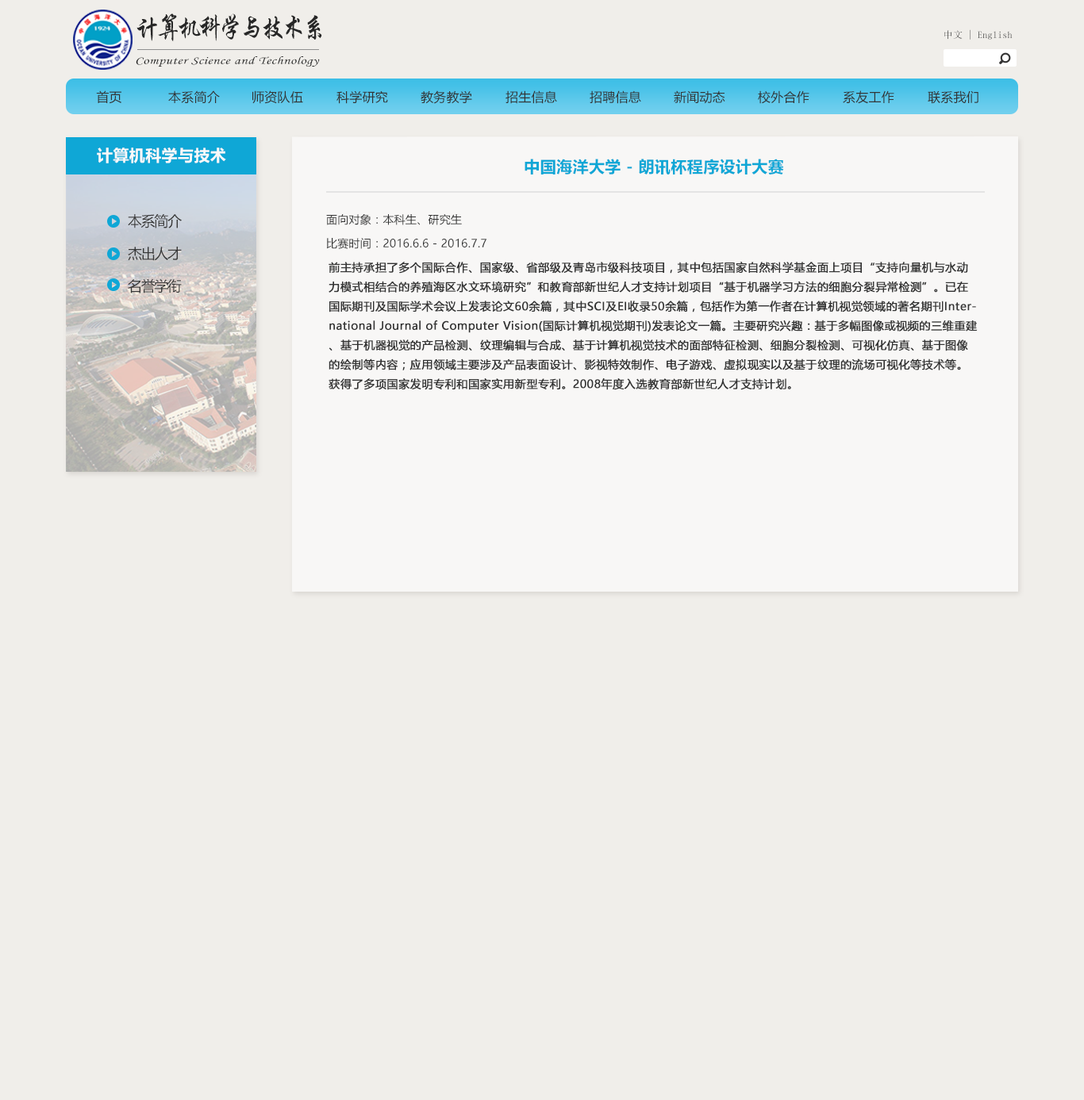
<style>
.page{position:relative;width:1084px;height:1100px;background:#f0eeea}
.page>*{position:absolute;margin:0}
.t1{font:27.6px "STXingkai";letter-spacing:-0.14em;color:#272727;scale:0.88 1}
.t2{font:9.5px "SimSun";letter-spacing:0.02em}
.t3{font:10.9px "STLiti";letter-spacing:0.02em;color:#272727;scale:1.34 1}
.t4{font:12.7px "MicrosoftYaHei";letter-spacing:0.02em;color:#333333}
.t5{font:15.9px "MicrosoftYaHei-Bold";letter-spacing:0.02em;color:#f9f9f9}
.t6{font:15.9px "MicrosoftYaHei-Bold";letter-spacing:0.02em;color:#0fa7d6}
.t7{font:14.3px "MicrosoftYaHei";letter-spacing:-0.076em;color:#383838}
.t8{font:11.1px "MicrosoftYaHei";letter-spacing:0.02em;color:#333333}
.t9{font:11.1px "MicrosoftYaHei";letter-spacing:0.02em;color:#333333;font-weight:bold}
</style>
<div class="page">
<p class="t1" style="left:136px;top:13px;width:186px;height:28px">计算机科学与技术系</p>
<p class="t2" style="left:944px;top:29px;width:68px;height:11px">中文 | English</p>
<p class="t3" style="left:136px;top:56px;width:184px;height:11px">Computer Science and Technology</p>
<p class="t4" style="left:96px;top:90px;width:25px;height:14px">首页</p>
<p class="t4" style="left:168px;top:90px;width:52px;height:14px">本系简介</p>
<p class="t4" style="left:252px;top:90px;width:51px;height:14px">师资队伍</p>
<p class="t4" style="left:336px;top:90px;width:52px;height:14px">科学研究</p>
<p class="t4" style="left:420px;top:90px;width:52px;height:14px">教务教学</p>
<p class="t4" style="left:505px;top:90px;width:52px;height:14px">招生信息</p>
<p class="t4" style="left:589px;top:90px;width:52px;height:14px">招聘信息</p>
<p class="t4" style="left:674px;top:90px;width:51px;height:14px">新闻动态</p>
<p class="t4" style="left:758px;top:90px;width:51px;height:14px">校外合作</p>
<p class="t4" style="left:843px;top:90px;width:51px;height:14px">系友工作</p>
<p class="t4" style="left:927px;top:90px;width:51px;height:14px">联系我们</p>
<p class="t5" style="left:97px;top:148px;width:129px;height:15px">计算机科学与技术</p>
<p class="t6" style="left:524px;top:159px;width:260px;height:16px">中国海洋大学 - 朗讯杯程序设计大赛</p>
<p class="t7" style="left:128px;top:214px;width:54px;height:14px">本系简介</p>
<p class="t8" style="left:326px;top:214px;width:136px;height:11px">面向对象：本科生、研究生</p>
<p class="t8" style="left:326px;top:238px;width:160px;height:11px">比赛时间：2016.6.6 - 2016.7.7</p>
<p class="t7" style="left:128px;top:247px;width:54px;height:14px">杰出人才</p>
<p class="t9" style="left:328px;top:262px;width:649px;height:128px">前主持承担了多个国际合作、国家级、省部级及青岛市级科技项目，其中包括国家自然科学基金面上项目“支持向量机与水动力模式相结合的养殖海区水文环境研究”和教育部新世纪人才支持计划项目“基于机器学习方法的细胞分裂异常检测”。已在国际期刊及国际学术会议上发表论文60余篇，其中SCI及EI收录50余篇，包括作为第一作者在计算机视觉领域的著名期刊International Journal of Computer Vision(国际计算机视觉期刊)发表论文一篇。主要研究兴趣：基于多幅图像或视频的三维重建、基于机器视觉的产品检测、纹理编辑与合成、基于计算机视觉技术的面部特征检测、细胞分裂检测、可视化仿真、基于图像的绘制等内容；应用领域主要涉及产品表面设计、影视特效制作、电子游戏、虚拟现实以及基于纹理的流场可视化等技术等。获得了多项国家发明专利和国家实用新型专利。2008年度入选教育部新世纪人才支持计划。</p>
<p class="t7" style="left:128px;top:278px;width:54px;height:16px">名誉学衔</p>
</div>
